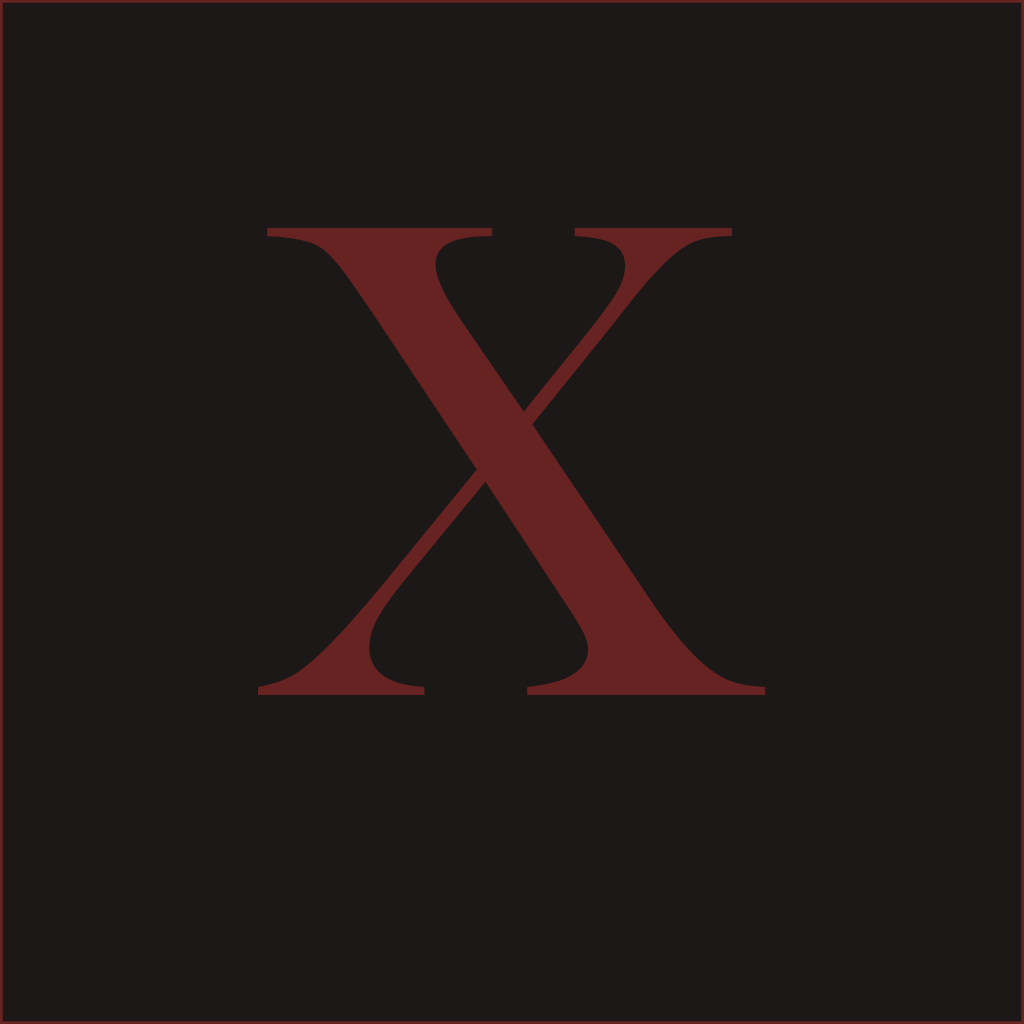
<style>
.page{position:relative;width:1024px;height:1024px;background:#1c1818}
.page>*{position:absolute;margin:0}
.t1{font:700px "BaskOldFace";color:#672222}
</style>
<div class="page">
<p class="t1" style="left:258px;top:227px;width:508px;height:468px">X</p>
</div>
